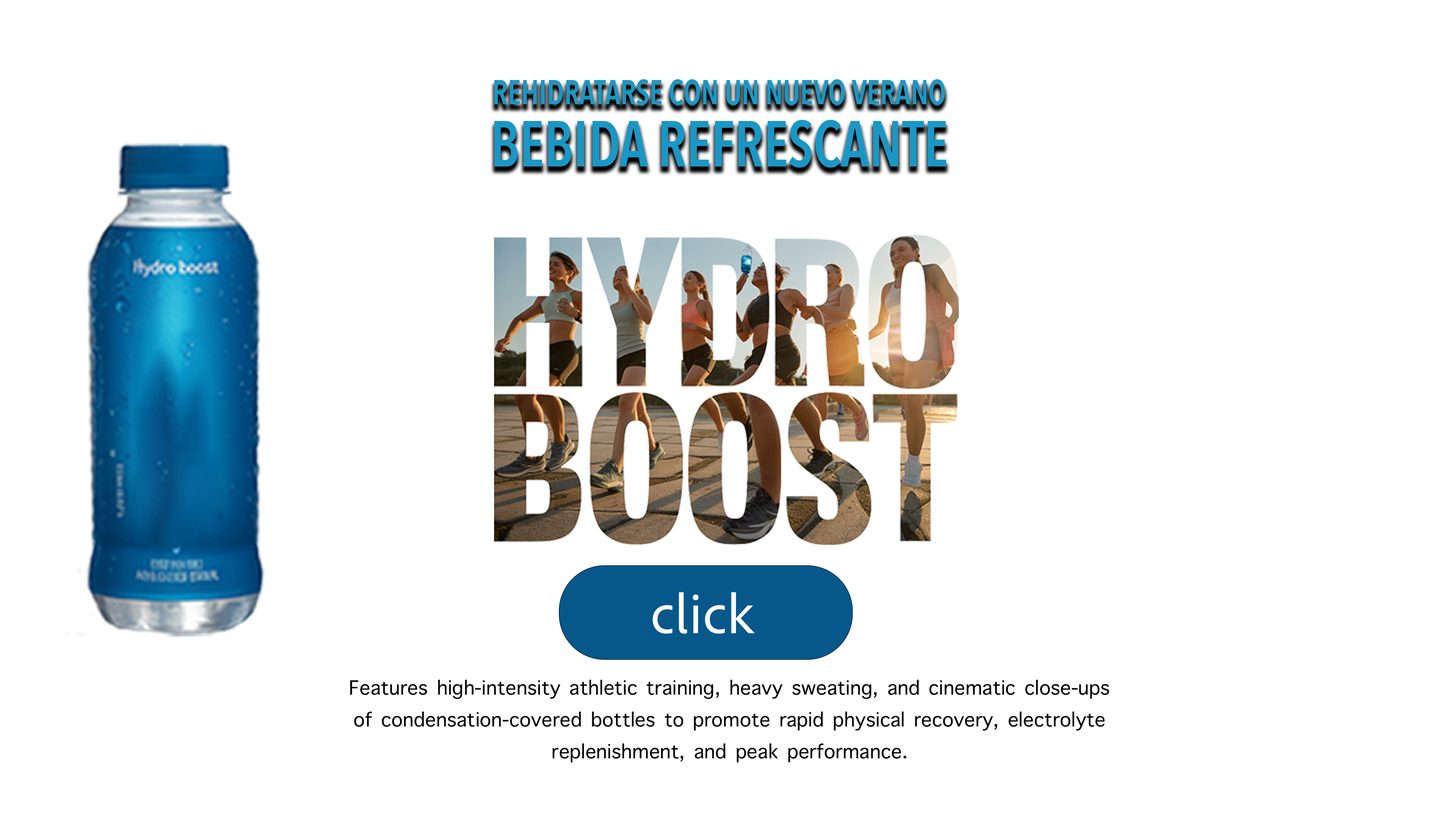
<style>
.page{position:relative;width:1456px;height:819px;background:#ffffff}
.page>*{position:absolute;margin:0}
.t1{font:34.5px/43.7px "AvenirNextCondensed-DemiBold";color:#1a97c5;scale:0.87 1}
.t2{font:64.5px/62.2px "AvenirNextCondensed-DemiBold";color:#1a97c5;scale:0.87 1}
.t3{font:57px "AdobeCleanUX-Regular";color:#ffffff}
.t4{font:26.5px "AppleSymbols";color:#000000}
</style>
<div class="page">
<p class="t1" style="left:494px;top:79px;width:452px;height:89px;text-align:center">REHIDRATARSE CON UN NUEVO VERANO<br><span class="t2">BEBIDA REFRESCANTE</span></p>
<p class="t3" style="left:653px;top:592px;width:102px;height:42px">click</p>
<p class="t4" style="left:350px;top:679px;width:759px;height:83px;text-align:center">Features high-intensity athletic training, heavy sweating, and cinematic close-ups of condensation-covered bottles to promote rapid physical recovery, electrolyte replenishment, and peak performance.</p>
</div>
